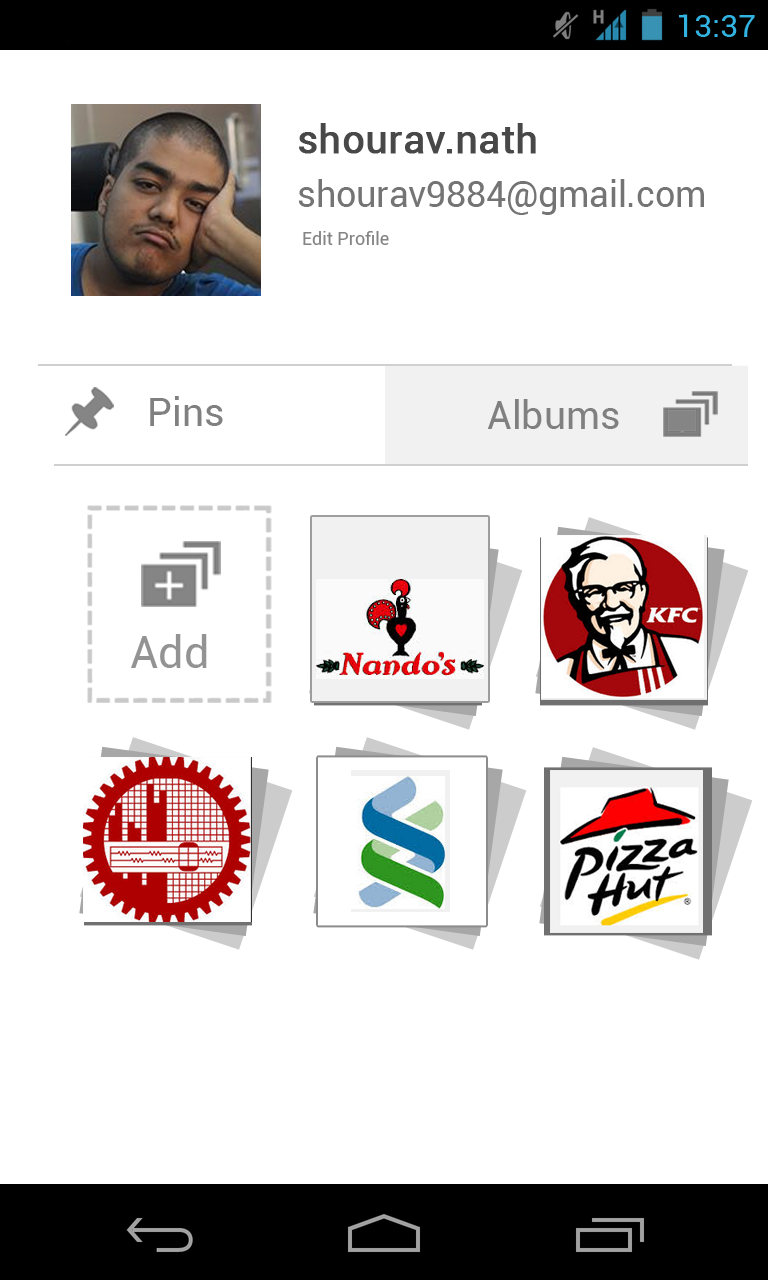
<style>
.page{position:relative;width:768px;height:1280px;background:#ffffff}
.page>*{position:absolute;margin:0}
.t1{font:39px "Roboto-Regular";color:#484848;font-weight:bold}
.t2{font:35.6px "Roboto-Regular";color:#747474}
.t3{font:18px "Roboto-Regular";color:#848484}
.t4{font:39px "Roboto-Regular";color:#808080}
.t5{font:45px "Roboto-Regular";color:#939393}
</style>
<div class="page">
<p class="t1" style="left:299px;top:123px;width:237px;height:31px">shourav.nath</p>
<p class="t2" style="left:298px;top:179px;width:406px;height:36px">shourav9884@gmail.com</p>
<p class="t3" style="left:303px;top:231px;width:86px;height:14px">Edit Profile</p>
<p class="t4" style="left:150px;top:396px;width:73px;height:30px">Pins</p>
<p class="t4" style="left:487px;top:399px;width:132px;height:30px">Albums</p>
<p class="t5" style="left:131px;top:634px;width:76px;height:34px">Add</p>
</div>
